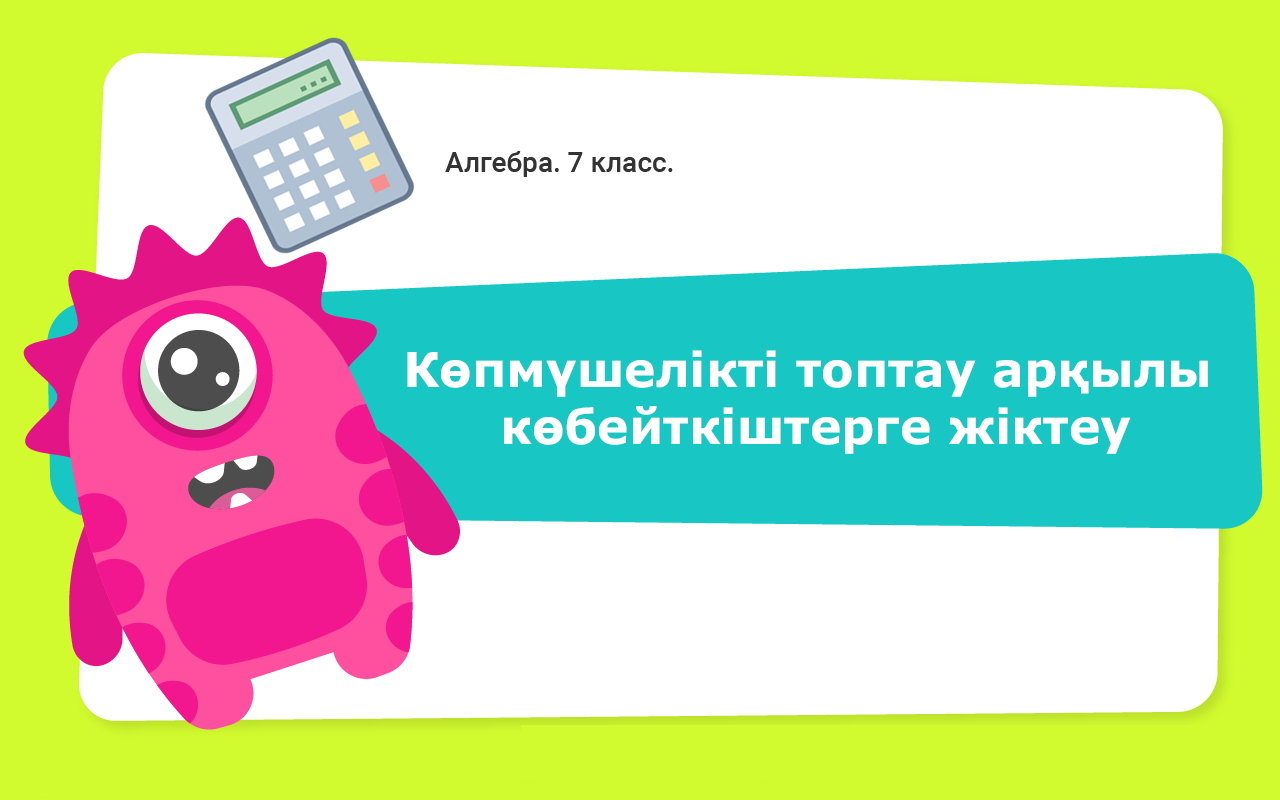
<style>
.page{position:relative;width:1280px;height:800px;background:#ffffff}
.page>*{position:absolute;margin:0}
.t1{font:48px "Verdana-Bold";color:#ffffff}
</style>
<div class="page">
<p class="t1" style="left:407px;top:350px;width:801px;height:104px;text-align:center">Көпмүшелікті топтау арқылы <br>көбейткіштерге жіктеу</p>
</div>
